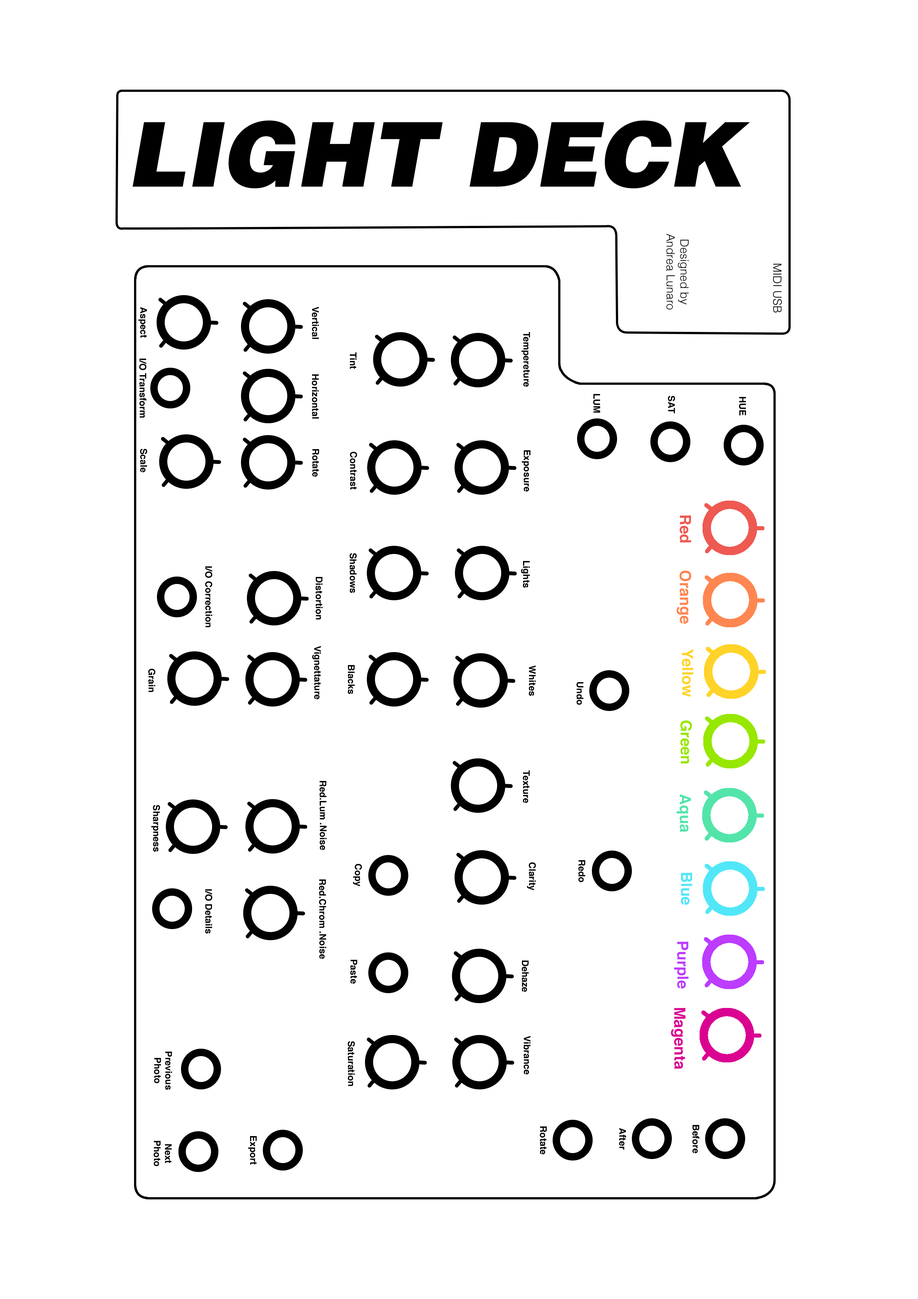
<style>
.page{position:relative;width:918px;height:1299px;background:#ffffff}
.page>*{position:absolute;margin:0}
.t1{font:11.5px "Helvetica-Light";color:#000000}
.t2{font:9.3px "Helvetica-Bold";color:#010101}
.t3{font:15.4px "Helvetica-Bold";color:#ee5952}
.t4{font:15.4px "Helvetica-Bold";color:#fe8651}
.t5{font:15.4px "Helvetica-Bold";color:#ffd327}
.t6{font:15.4px "Helvetica-Bold";color:#97e700}
.t7{font:15.4px "Helvetica-Bold";color:#53e4aa}
.t8{font:15.4px "Helvetica-Bold";color:#51e7f8}
.t9{font:15.4px "Helvetica-Bold";color:#bc3cff}
.t10{font:15.4px "Helvetica-Bold";color:#da0391}
</style>
<div class="page">
<p class="t1" style="left:666px;top:234px;width:23px;height:76px;text-align:center;rotate:90deg">Designed by <br>Andrea Lunaro</p>
<p class="t1" style="left:773px;top:264px;width:9px;height:48px;rotate:90deg">MIDI USB</p>
<p class="t2" style="left:138px;top:307px;width:9px;height:31px;rotate:90deg">Aspect</p>
<p class="t2" style="left:312px;top:307px;width:7px;height:32px;rotate:90deg">Vertical</p>
<p class="t2" style="left:521px;top:332px;width:9px;height:55px;rotate:90deg">Tempereture</p>
<p class="t2" style="left:350px;top:352px;width:7px;height:17px;rotate:90deg">Tint</p>
<p class="t2" style="left:139px;top:358px;width:8px;height:60px;rotate:90deg">I/O Transform</p>
<p class="t2" style="left:312px;top:374px;width:7px;height:45px;rotate:90deg">Horizontal</p>
<p class="t2" style="left:593px;top:394px;width:7px;height:19px;rotate:90deg">LUM</p>
<p class="t2" style="left:668px;top:396px;width:7px;height:18px;rotate:90deg">SAT</p>
<p class="t2" style="left:739px;top:397px;width:7px;height:18px;rotate:90deg">HUE</p>
<p class="t2" style="left:140px;top:449px;width:7px;height:23px;rotate:90deg">Scale</p>
<p class="t2" style="left:312px;top:449px;width:7px;height:28px;rotate:90deg">Rotate</p>
<p class="t2" style="left:350px;top:452px;width:7px;height:37px;rotate:90deg">Contrast</p>
<p class="t2" style="left:522px;top:450px;width:9px;height:42px;rotate:90deg">Exposure</p>
<p class="t3" style="left:680px;top:515px;width:11px;height:27px;rotate:90deg">Red</p>
<p class="t2" style="left:349px;top:553px;width:8px;height:40px;rotate:90deg">Shadows</p>
<p class="t2" style="left:205px;top:566px;width:8px;height:61px;rotate:90deg">I/O Correction</p>
<p class="t2" style="left:521px;top:561px;width:9px;height:27px;rotate:90deg">Lights</p>
<p class="t2" style="left:315px;top:577px;width:8px;height:42px;rotate:90deg">Distortion</p>
<p class="t4" style="left:677px;top:571px;width:15px;height:53px;rotate:90deg">Orange</p>
<p class="t2" style="left:312px;top:646px;width:9px;height:53px;rotate:90deg">Vignettature</p>
<p class="t5" style="left:682px;top:649px;width:11px;height:48px;rotate:90deg">Yellow</p>
<p class="t2" style="left:348px;top:665px;width:7px;height:29px;rotate:90deg">Blacks</p>
<p class="t2" style="left:529px;top:665px;width:7px;height:31px;rotate:90deg">Whites</p>
<p class="t2" style="left:148px;top:669px;width:7px;height:23px;rotate:90deg">Grain</p>
<p class="t2" style="left:576px;top:682px;width:7px;height:23px;rotate:90deg">Undo</p>
<p class="t6" style="left:680px;top:720px;width:12px;height:43px;rotate:90deg">Green</p>
<p class="t2" style="left:523px;top:770px;width:7px;height:33px;rotate:90deg">Texture</p>
<p class="t2" style="left:320px;top:781px;width:7px;height:69px;rotate:90deg">Red.Lum .Noise</p>
<p class="t7" style="left:677px;top:794px;width:14px;height:38px;rotate:90deg">Aqua</p>
<p class="t2" style="left:151px;top:805px;width:9px;height:47px;rotate:90deg">Sharpness</p>
<p class="t2" style="left:353px;top:864px;width:9px;height:22px;rotate:90deg">Copy</p>
<p class="t2" style="left:527px;top:862px;width:9px;height:28px;rotate:90deg">Clarity</p>
<p class="t2" style="left:578px;top:860px;width:7px;height:22px;rotate:90deg">Redo</p>
<p class="t2" style="left:319px;top:879px;width:8px;height:80px;rotate:90deg">Red.Chrom .Noise</p>
<p class="t8" style="left:681px;top:873px;width:11px;height:32px;rotate:90deg">Blue</p>
<p class="t2" style="left:205px;top:889px;width:8px;height:44px;rotate:90deg">I/O Details</p>
<p class="t9" style="left:674px;top:941px;width:15px;height:47px;rotate:90deg">Purple</p>
<p class="t2" style="left:350px;top:960px;width:7px;height:24px;rotate:90deg">Paste</p>
<p class="t2" style="left:522px;top:960px;width:7px;height:32px;rotate:90deg">Dehaze</p>
<p class="t10" style="left:671px;top:1008px;width:15px;height:61px;rotate:90deg">Magenta</p>
<p class="t2" style="left:523px;top:1036px;width:8px;height:38px;rotate:90deg">Vibrance</p>
<p class="t2" style="left:348px;top:1041px;width:7px;height:45px;rotate:90deg">Saturation</p>
<p class="t2" style="left:154px;top:1051px;width:18px;height:39px;rotate:90deg">Previous Photo</p>
<p class="t2" style="left:540px;top:1126px;width:7px;height:28px;rotate:90deg">Rotate</p>
<p class="t2" style="left:619px;top:1128px;width:7px;height:22px;rotate:90deg">After</p>
<p class="t2" style="left:692px;top:1125px;width:8px;height:28px;rotate:90deg">Before</p>
<p class="t2" style="left:154px;top:1141px;width:18px;height:25px;rotate:90deg">Next Photo</p>
<p class="t2" style="left:248px;top:1136px;width:9px;height:28px;rotate:90deg">Export</p>
</div>
